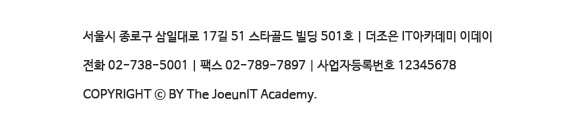
<style>
.page{position:relative;width:580px;height:128px;background:#ffffff}
.page>*{position:absolute;margin:0}
.t1{font:12px "NanumBarunGothic";color:#2e2e2e;font-weight:bold}
</style>
<div class="page">
<p class="t1" style="left:82px;top:30px;width:410px;height:73px">서울시 종로구 삼일대로 17길 51 스타골드 빌딩 501호 | 더조은 IT아카데미 이데이<br><br>전화 02-738-5001 | 팩스 02-789-7897 | 사업자등록번호 12345678<br><br>COPYRIGHT ⓒ BY The JoeunIT Academy.</p>
</div>
